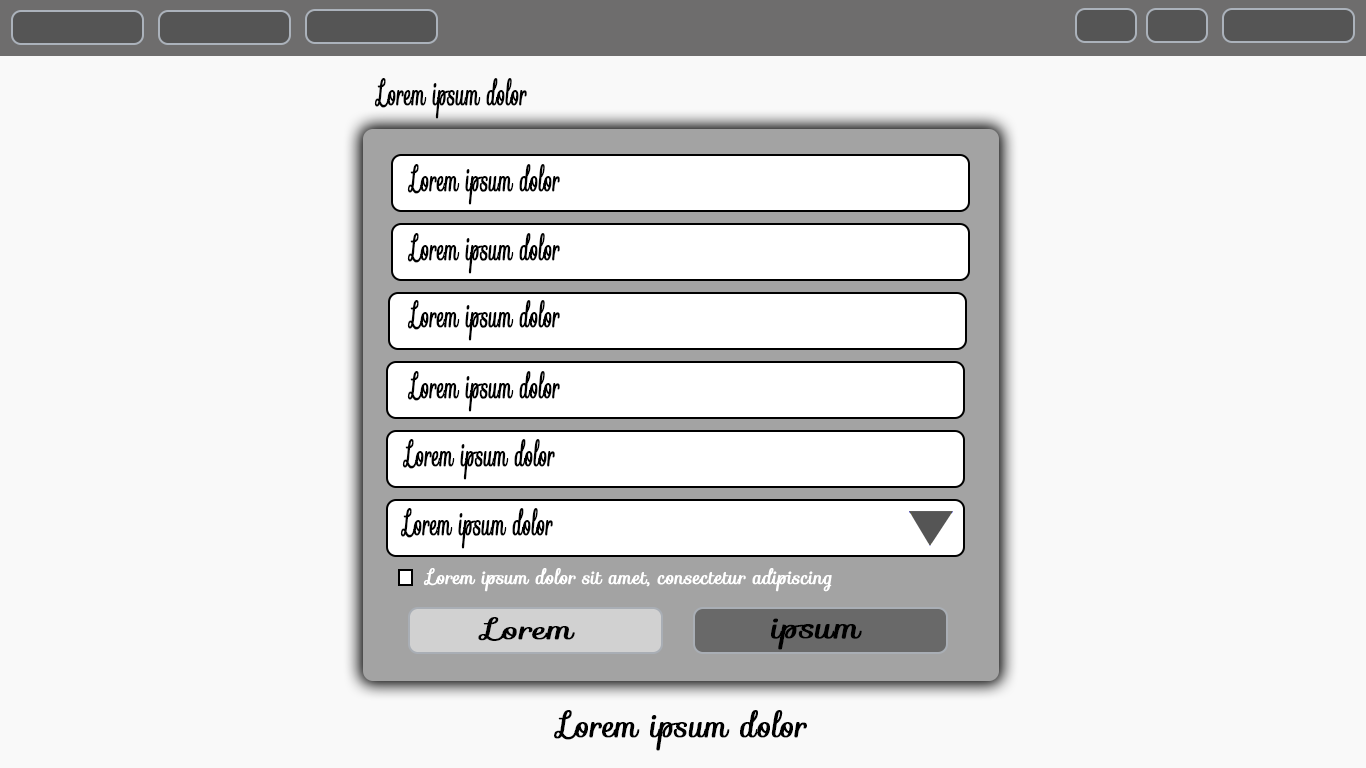
<style>
.page{position:relative;width:1366px;height:768px;background:#f9f9f9}
.page>*{position:absolute;margin:0}
.t1{font:33px "Sofia-Regular";color:#000000;font-weight:bold;font-style:italic;scale:0.53 1}
.t2{font:19.2px "Sofia-Regular";color:#ffffff;font-weight:bold;font-style:italic;scale:0.91 1}
.t3{font:27.7px "Sofia-Regular";color:#000000;font-weight:bold;font-style:italic;scale:1.2 1}
.t4{font:30px "Sofia-Regular";color:#000000;font-weight:bold;font-style:italic;scale:1.11 1}
.t5{font:33px "Sofia-Regular";color:#000000;font-weight:bold;font-style:italic;scale:0.88 1}
</style>
<div class="page">
<p class="t1" style="left:374px;top:78px;width:153px;height:41px">Lorem ipsum dolor</p>
<p class="t1" style="left:407px;top:164px;width:153px;height:41px">Lorem ipsum dolor</p>
<p class="t1" style="left:407px;top:233px;width:153px;height:41px">Lorem ipsum dolor</p>
<p class="t1" style="left:407px;top:300px;width:153px;height:41px">Lorem ipsum dolor</p>
<p class="t1" style="left:407px;top:371px;width:153px;height:41px">Lorem ipsum dolor</p>
<p class="t1" style="left:402px;top:439px;width:153px;height:41px">Lorem ipsum dolor</p>
<p class="t1" style="left:400px;top:508px;width:153px;height:41px">Lorem ipsum dolor</p>
<p class="t2" style="left:423px;top:568px;width:409px;height:24px">Lorem ipsum dolor sit amet, consectetur adipiscing</p>
<p class="t3" style="left:478px;top:617px;width:97px;height:24px">Lorem</p>
<p class="t4" style="left:771px;top:618px;width:91px;height:32px">ipsum</p>
<p class="t5" style="left:554px;top:710px;width:253px;height:41px">Lorem ipsum dolor</p>
</div>
